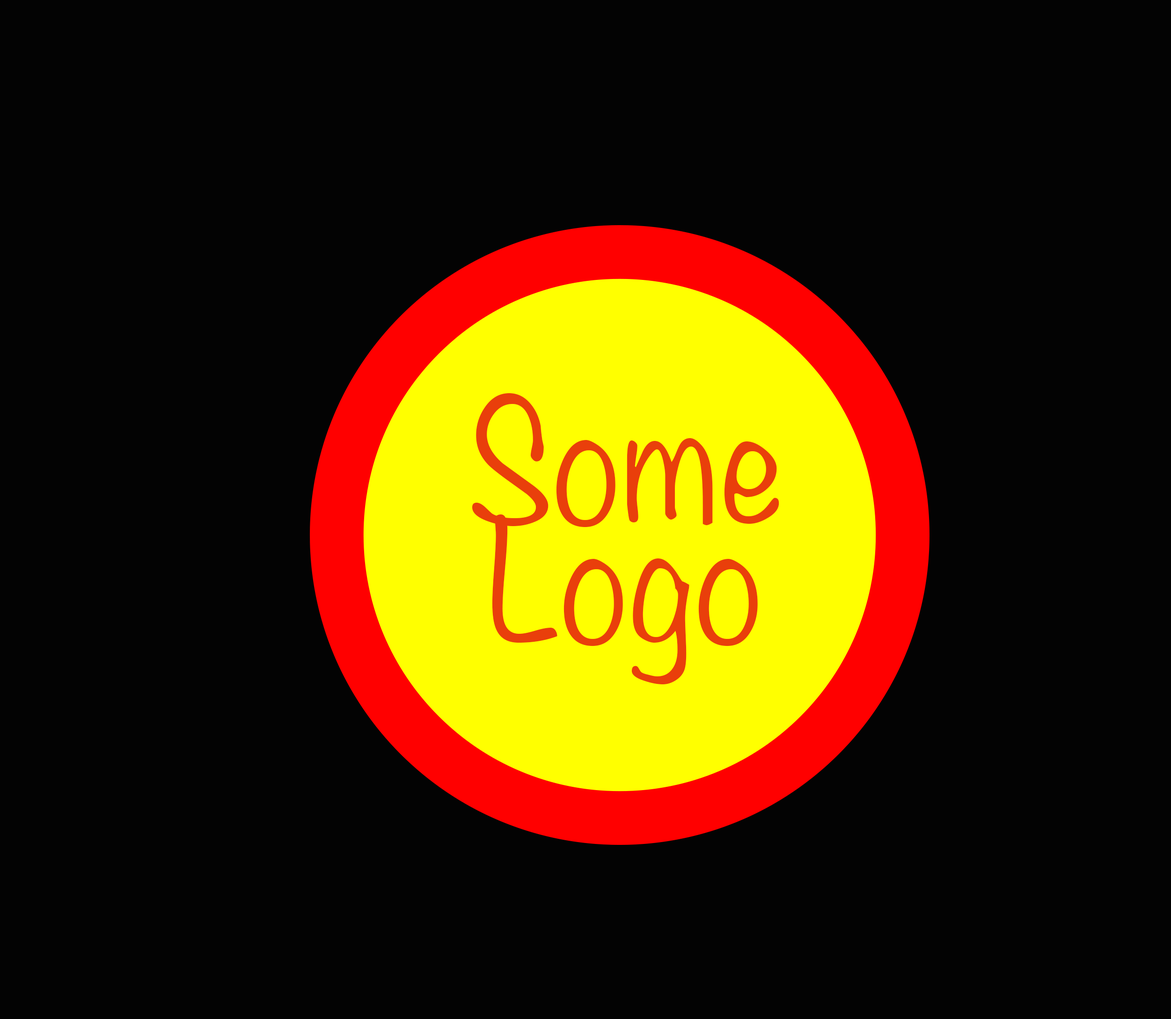
<style>
.page{position:relative;width:1171px;height:1019px;background:#030303}
.page>*{position:absolute;margin:0}
.t1{font:148.6px/118.8px "Noteworthy-Light";color:#e93f0b}
</style>
<div class="page">
<p class="t1" style="left:472px;top:393px;width:307px;height:291px;text-align:center">Some <br>Logo</p>
</div>
